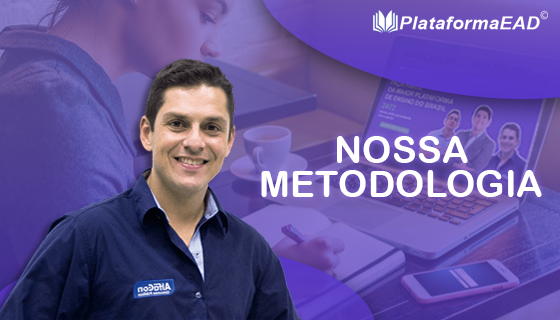
<style>
.page{position:relative;width:560px;height:320px}
.page>*{position:absolute;margin:0}
.t1{font:37.3px/34px "ArialRoundedMTBold";color:#ffffff;text-transform:uppercase}
</style>
<div class="page">
<p class="t1" style="left:261px;top:136px;width:281px;height:61px;text-align:center">nossa<br>metodologia</p>
</div>
